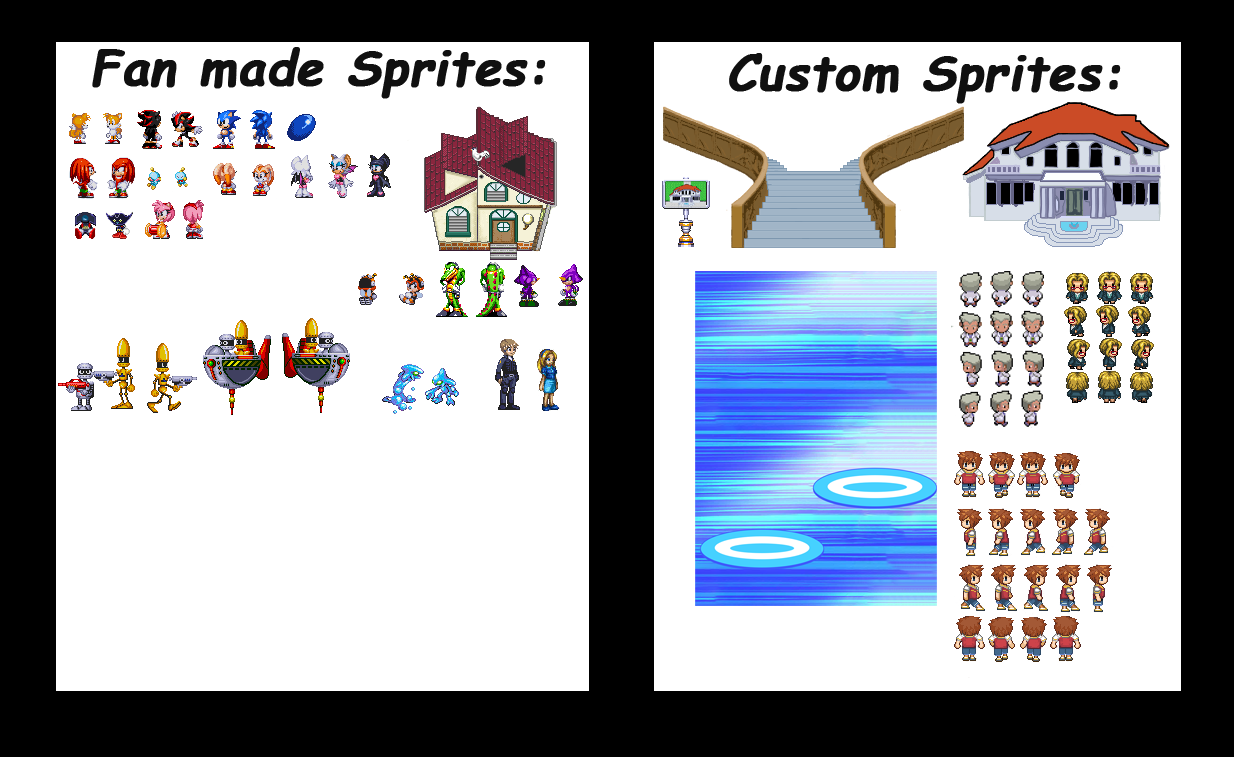
<style>
.page{position:relative;width:1234px;height:757px;background:#ffffff}
.page>*{position:absolute;margin:0}
.t1{font:48px "ComicSansMS-Bold";letter-spacing:0.005em;color:#101010;font-weight:bold;font-style:italic}
</style>
<div class="page">
<p class="t1" style="left:92px;top:47px;width:454px;height:52px">Fan made Sprites:</p>
<p class="t1" style="left:729px;top:53px;width:392px;height:51px">Custom Sprites:</p>
</div>
